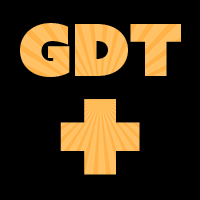
<style>
.page{position:relative;width:200px;height:200px;background:#000000}
.page>*{position:absolute;margin:0}
.t1{font:72px "AzoSansUber-Regular"}
.t2{font:150px "AzoSansUber-Regular";color:#ffbf5f}
</style>
<div class="page">
<p class="t1" style="left:20px;top:23px;width:161px;height:54px">GDT</p>
<p class="t2" style="left:60px;top:99px;width:80px;height:76px">+</p>
</div>
